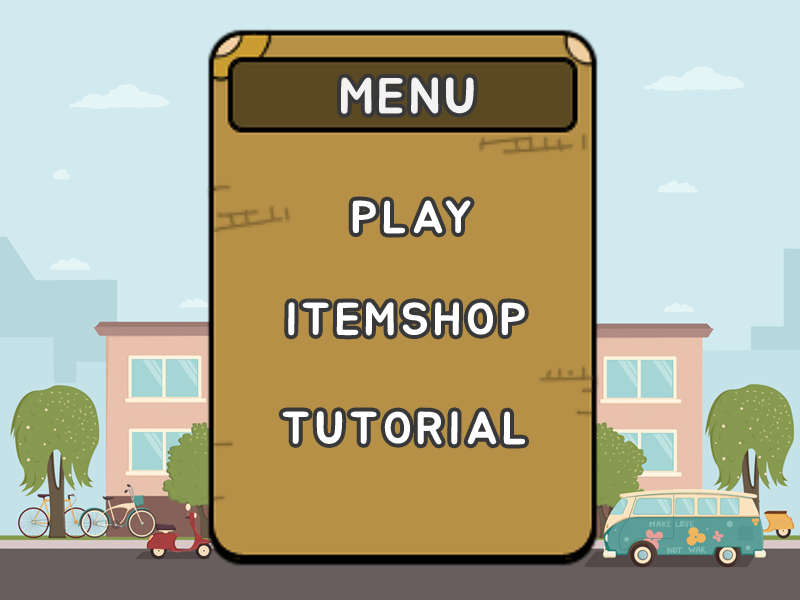
<style>
.page{position:relative;width:800px;height:600px;background:#b69047}
.page>*{position:absolute;margin:0}
.t1{font:50px "BMJUA";letter-spacing:0.08em;color:#f4f3f2}
.t2{font:45.8px "BMJUA";letter-spacing:0.1em;color:#ffffff}
</style>
<div class="page">
<p class="t1" style="left:341px;top:77px;width:133px;height:37px">MENU</p>
<p class="t2" style="left:352px;top:200px;width:119px;height:34px">PLAY</p>
<p class="t2" style="left:288px;top:302px;width:237px;height:34px">ITEMSHOP</p>
<p class="t2" style="left:282px;top:411px;width:243px;height:34px">TUTORIAL</p>
</div>
